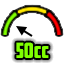
<style>
.page{position:relative;width:64px;height:64px;background:#ffffff}
.page>*{position:absolute;margin:0}
.t1{font:20px "VoyageFantastiqueStraight";color:#80ff00}
</style>
<div class="page">
<p class="t1" style="left:16px;top:42px;width:33px;height:16px">50cc</p>
</div>
